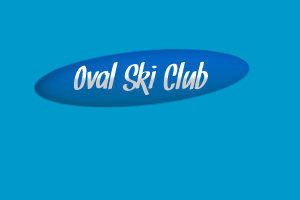
<style>
.page{position:relative;width:300px;height:200px;background:#0099cc}
.page>*{position:absolute;margin:0}
.t1{font:36px "Snickles"}
</style>
<div class="page">
<p class="t1" style="left:74px;top:61px;width:134px;height:34px">Oval Ski Club</p>
</div>
